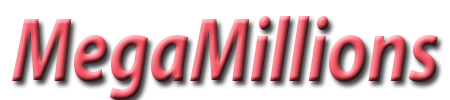
<style>
.page{position:relative;width:450px;height:100px;background:#ffffff}
.page>*{position:absolute;margin:0}
.t1{font:92px "MyriadPro-BoldIt";scale:0.79 1}
</style>
<div class="page">
<p class="t1" style="left:12px;top:16px;width:426px;height:84px">MegaMillions</p>
</div>
